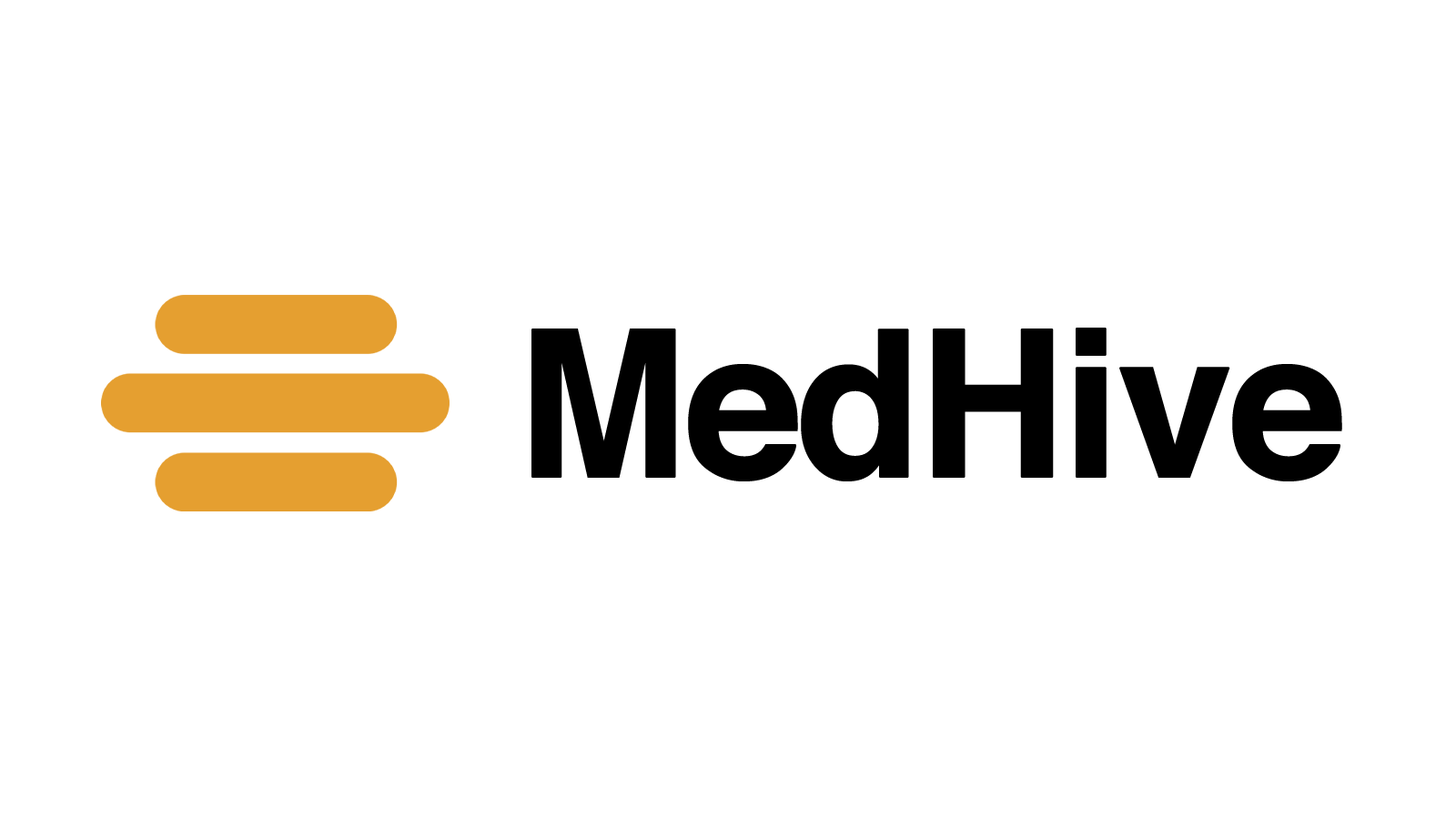
<style>
.page{position:relative;width:1456px;height:819px;background:#ffffff}
.page>*{position:absolute;margin:0}
.t1{font:204.7px "Helvetica-Bold";letter-spacing:-0.04em;color:#000000;font-weight:bold}
</style>
<div class="page">
<p class="t1" style="left:531px;top:328px;width:811px;height:153px">MedHive</p>
</div>
